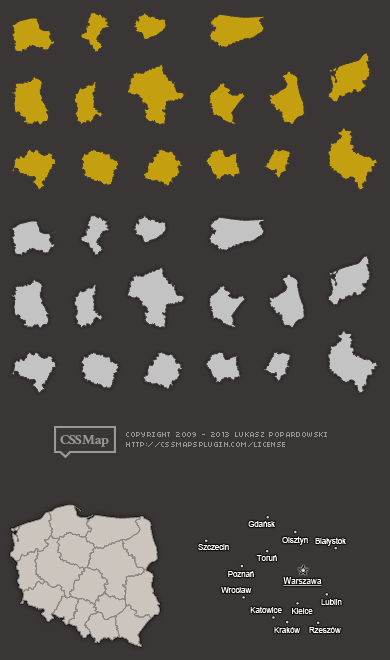
<style>
.page{position:relative;width:390px;height:660px;background:#3a3635}
.page>*{position:absolute;margin:0}
.t1{font:8px "ArialMT";color:#ffffff}
.t2{font:9px "ArialMT";color:#ffffff;text-decoration:underline;scale:0.91 1}
</style>
<div class="page">
<p class="t1" style="left:248px;top:521px;width:27px;height:6px">Gdańsk</p>
<p class="t1" style="left:198px;top:544px;width:31px;height:6px">Szczecin</p>
<p class="t1" style="left:282px;top:536px;width:26px;height:9px">Olsztyn</p>
<p class="t1" style="left:315px;top:537px;width:31px;height:9px">Białystok</p>
<p class="t1" style="left:256px;top:555px;width:21px;height:6px">Toruń</p>
<p class="t1" style="left:228px;top:571px;width:26px;height:6px">Poznań</p>
<p class="t2" style="left:283px;top:577px;width:39px;height:9px">Warszawa</p>
<p class="t1" style="left:221px;top:587px;width:31px;height:6px">Wrocław</p>
<p class="t1" style="left:250px;top:606px;width:32px;height:7px">Katowice</p>
<p class="t1" style="left:321px;top:599px;width:21px;height:6px">Lublin</p>
<p class="t1" style="left:292px;top:608px;width:21px;height:6px">Kielce</p>
<p class="t1" style="left:274px;top:627px;width:26px;height:6px">Kraków</p>
<p class="t1" style="left:309px;top:627px;width:32px;height:6px">Rzeszów</p>
</div>
